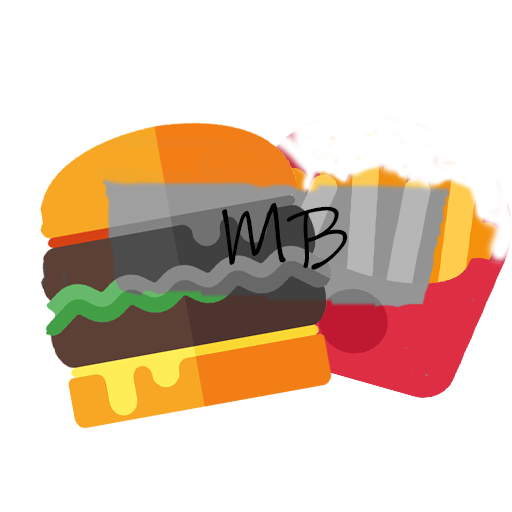
<style>
.page{position:relative;width:512px;height:512px;background:#ffffff}
.page>*{position:absolute;margin:0}
.t1{font:90px "InkFree";color:#000000}
</style>
<div class="page">
<p class="t1" style="left:222px;top:203px;width:126px;height:67px">MB</p>
</div>
